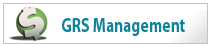
<style>
.page{position:relative;width:211px;height:47px;background:#ffffff}
.page>*{position:absolute;margin:0}
.t1{font:20px "MyriadPro-Bold";color:#11839a;scale:0.78 1}
</style>
<div class="page">
<p class="t1" style="left:62px;top:18px;width:123px;height:18px">GRS Management</p>
</div>
